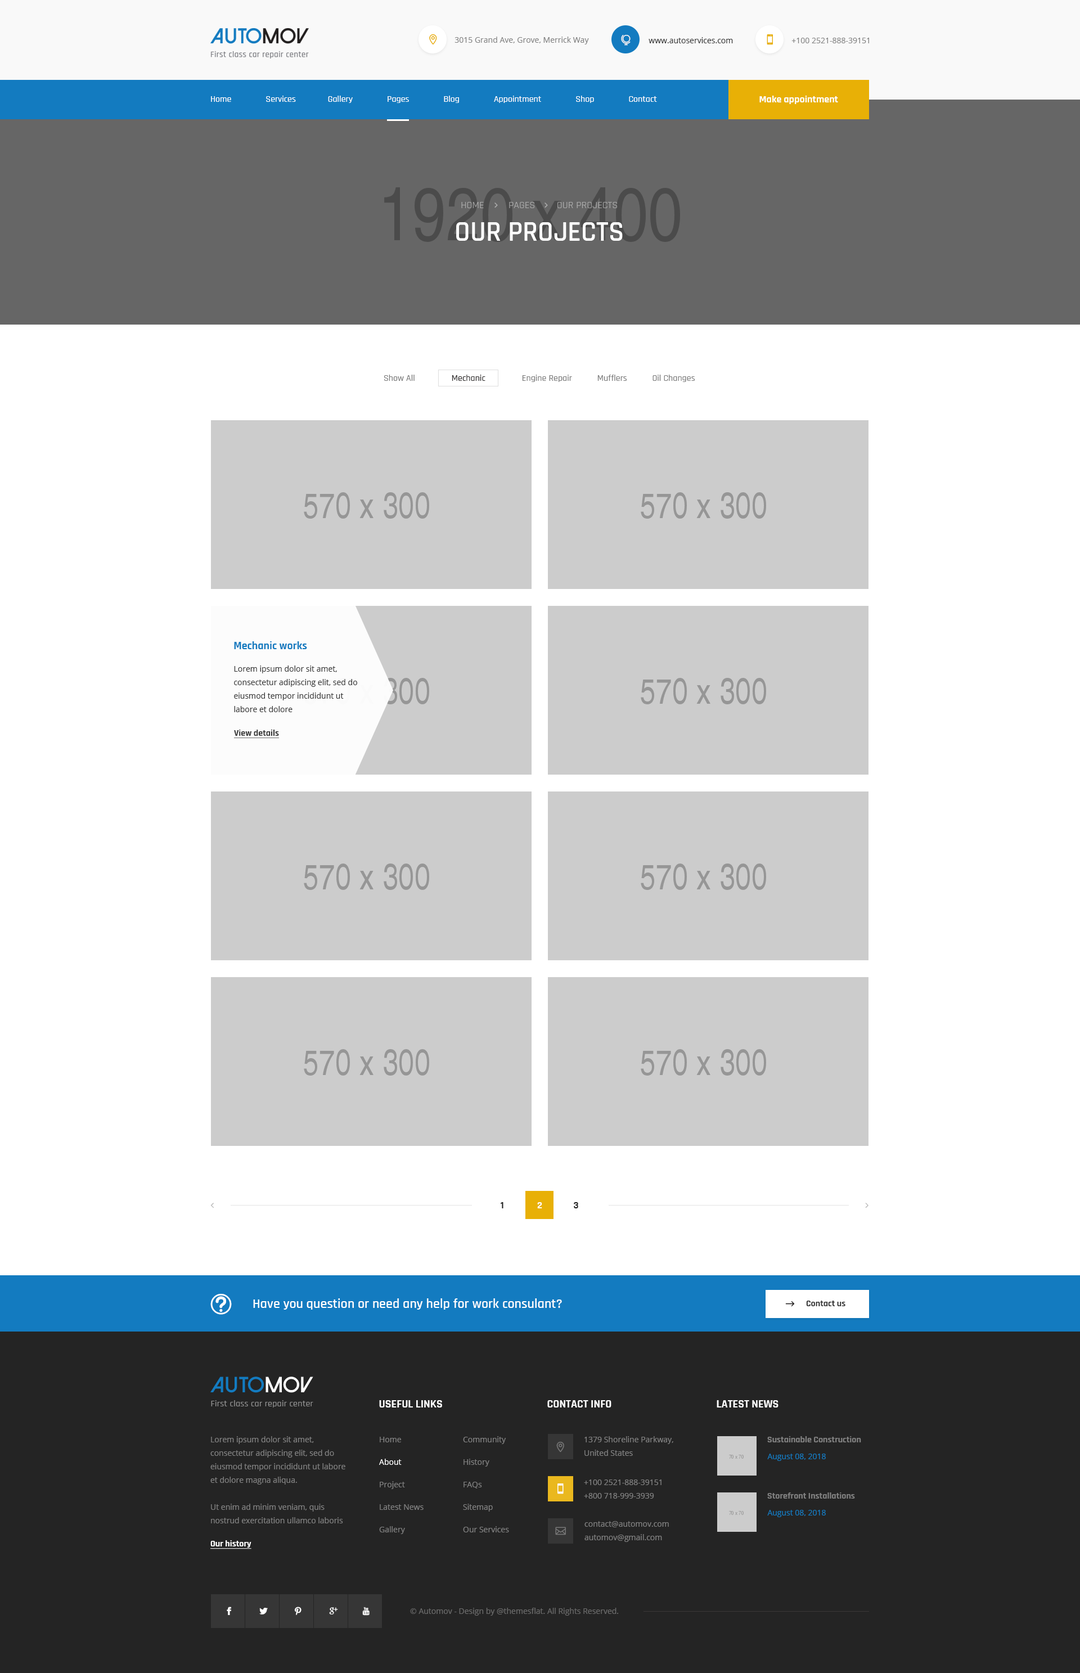
<style>
.page{position:relative;width:1080px;height:1673px;background:#ffffff}
.page>*{position:absolute;margin:0}
.t1{font:7.9px "OpenSans";color:#838383}
.t2{font:7.9px "OpenSans";color:#363636}
.t3{font:9px "Rajdhani-Medium";color:#ffffff}
.t4{font:10.1px "Rajdhani-Bold";color:#ffffff}
.t5{font:10.1px "Rajdhani-Regular";color:#adadad}
.t6{font:28.1px "Rajdhani-SemiBold";color:#ffffff;text-transform:uppercase}
.t7{font:9px "Rajdhani-Medium";color:#7d7d7d}
.t8{font:9px "Rajdhani-Medium";color:#7c7c7c}
.t9{font:9px "Rajdhani-Medium";color:#302d2d}
.t10{font:11.2px "Rajdhani-Bold";color:#137bc0}
.t11{font:7.9px/13.5px "OpenSans";color:#363636}
.t12{font:9px "Rajdhani-Bold";color:#363636;text-decoration:underline}
.t13{font:10.1px "Rajdhani-Bold";color:#242424}
.t14{font:13.5px "Rajdhani-SemiBold";color:#ffffff}
.t15{font:9px "Rajdhani-Bold";color:#363636}
.t16{font:11.2px "Rajdhani-Bold";color:#ffffff;text-transform:uppercase}
.t17{font:11.2px "Rajdhani-Bold";color:#ffffff}
.t18{font:7.9px/13.5px "OpenSans";color:#808080}
.t19{font:7.9px/22.5px "OpenSans";color:#808080}
.t20{font:7.9px/22.5px "OpenSans";color:#ffffff}
.t21{font:9px "Rajdhani-Bold";color:#808080}
.t22{font:7.9px "OpenSans";color:#137bc0}
.t23{font:9px "Rajdhani-Bold";color:#ffffff;text-decoration:underline}
.t24{font:7.9px "OpenSans";color:#6a6a6a}
</style>
<div class="page">
<p class="t1" style="left:454px;top:37px;width:135px;height:7px">3015 Grand Ave, Grove, Merrick Way</p>
<p class="t2" style="left:649px;top:37px;width:84px;height:6px">www.autoservices.com</p>
<p class="t1" style="left:791px;top:38px;width:78px;height:5px">+100 2521-888-39151</p>
<p class="t3" style="left:211px;top:96px;width:446px;height:7px">Home               Services              Gallery               Pages               Blog               Appointment               Shop               Contact</p>
<p class="t4" style="left:759px;top:96px;width:79px;height:8px">Make appointment</p>
<p class="t5" style="left:461px;top:202px;width:156px;height:6px">HOME         PAGES        OUR PROJECTS</p>
<p class="t6" style="left:456px;top:222px;width:167px;height:19px">OUR projects</p>
<p class="t7" style="left:384px;top:375px;width:311px;height:7px"><span class="t8">Show All          </span><span class="t9">      Mechanic                </span>Engine Repair           Mufflers           Oil Changes</p>
<p class="t10" style="left:234px;top:641px;width:73px;height:8px">Mechanic works</p>
<p class="t11" style="left:234px;top:665px;width:123px;height:47px">Lorem ipsum dolor sit amet, consectetur adipiscing elit, sed do eiusmod tempor incididunt ut labore et dolore</p>
<p class="t12" style="left:234px;top:730px;width:46px;height:9px">View details</p>
<p class="t13" style="left:501px;top:1202px;width:77px;height:6px">1               <span class="t4">2 </span>             3</p>
<p class="t14" style="left:253px;top:1298px;width:309px;height:12px">Have you question or need any help for work consulant?</p>
<p class="t15" style="left:806px;top:1300px;width:39px;height:6px">Contact us</p>
<p class="t16" style="left:379px;top:1400px;width:63px;height:7px">Useful Links</p>
<p class="t17" style="left:547px;top:1400px;width:64px;height:7px">CONTACT INFO</p>
<p class="t16" style="left:717px;top:1400px;width:61px;height:7px">Latest news</p>
<p class="t18" style="left:210px;top:1436px;width:135px;height:87px">Lorem ipsum dolor sit amet, consectetur adipiscing elit, sed do eiusmod tempor incididunt ut labore et dolore magna aliqua. <br><br>Ut enim ad minim veniam, quis nostrud exercitation ullamco laboris nisi</p>
<p class="t19" style="left:379px;top:1437px;width:45px;height:97px">Home<br><span class="t20">About<br></span>Project<br>Latest News<br>Gallery</p>
<p class="t19" style="left:463px;top:1436px;width:46px;height:96px">Community<br>History<br>FAQs<br>Sitemap<br>Our Services</p>
<p class="t18" style="left:584px;top:1436px;width:89px;height:20px">1379 Shoreline Parkway, <br>United States</p>
<p class="t21" style="left:767px;top:1436px;width:94px;height:6px">Sustainable Construction</p>
<p class="t22" style="left:767px;top:1454px;width:59px;height:7px">August 08, 2018</p>
<p class="t18" style="left:584px;top:1479px;width:78px;height:19px">+100 2521-888-39151<br>+800 718-999-3939</p>
<p class="t21" style="left:767px;top:1492px;width:88px;height:6px">Storefront Installations</p>
<p class="t22" style="left:767px;top:1510px;width:59px;height:7px">August 08, 2018</p>
<p class="t18" style="left:584px;top:1521px;width:85px;height:21px">contact@automov.com<br>automov@gmail.com</p>
<p class="t23" style="left:210px;top:1540px;width:41px;height:9px">Our history</p>
<p class="t24" style="left:410px;top:1608px;width:208px;height:8px">© Automov - Design by @themesflat. All Rights Reserved.</p>
</div>
